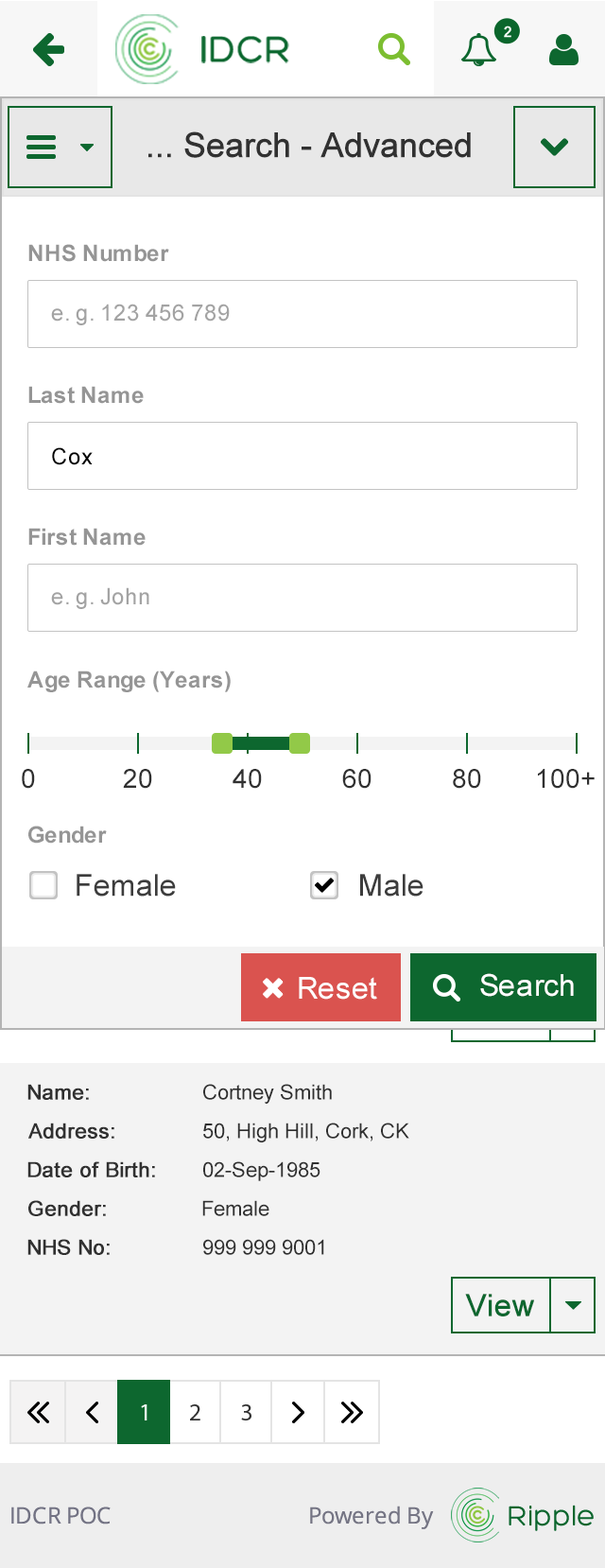
<style>
.page{position:relative;width:605px;height:1568px;background:#ffffff}
.page>*{position:absolute;margin:0}
.t1{font:34px "ArialMT";color:#313131;font-weight:bold}
.t2{font:22.7px "Arial-BoldMT";color:#959595}
.t3{font:22.7px "ArialMT";color:#a3a3a3}
.t4{font:22.7px "ArialMT";color:#000000}
.t5{font:26.5px "ArialMT";color:#303030}
.t6{font:30.3px "ArialMT";color:#3c3c3c}
.t7{font:30.3px "ArialMT";color:#ffffff}
.t8{font:20.8px "ArialMT";color:#303030;font-weight:bold}
.t9{font:20.8px "ArialMT";color:#303030}
.t10{font:30.3px "ArialMT";color:#0d672f;font-weight:bold}
</style>
<div class="page">
<p class="t1" style="left:148px;top:131px;width:323px;height:27px">... Search - Advanced</p>
<p class="t2" style="left:28px;top:244px;width:141px;height:18px">NHS Number</p>
<p class="t3" style="left:51px;top:304px;width:179px;height:21px">e. g. 123 456 789</p>
<p class="t2" style="left:28px;top:386px;width:116px;height:18px">Last Name</p>
<p class="t4" style="left:52px;top:447px;width:41px;height:18px">Cox</p>
<p class="t2" style="left:28px;top:528px;width:118px;height:18px">First Name</p>
<p class="t3" style="left:51px;top:587px;width:98px;height:22px">e. g. John</p>
<p class="t2" style="left:27px;top:671px;width:204px;height:21px">Age Range (Years)</p>
<p class="t5" style="left:22px;top:769px;width:13px;height:20px">0</p>
<p class="t5" style="left:123px;top:769px;width:29px;height:20px">20</p>
<p class="t5" style="left:233px;top:769px;width:29px;height:20px">40</p>
<p class="t5" style="left:342px;top:769px;width:30px;height:20px">60</p>
<p class="t5" style="left:453px;top:769px;width:28px;height:20px">80</p>
<p class="t5" style="left:538px;top:769px;width:57px;height:20px">100+</p>
<p class="t2" style="left:28px;top:826px;width:79px;height:18px">Gender</p>
<p class="t6" style="left:77px;top:874px;width:99px;height:23px">Female</p>
<p class="t6" style="left:360px;top:874px;width:64px;height:23px">Male</p>
<p class="t7" style="left:299px;top:977px;width:78px;height:23px">Reset</p>
<p class="t7" style="left:480px;top:973px;width:94px;height:24px">Search</p>
<p class="t8" style="left:27px;top:1084px;width:62px;height:16px">Name:</p>
<p class="t9" style="left:203px;top:1084px;width:129px;height:20px">Cortney Smith</p>
<p class="t8" style="left:28px;top:1123px;width:86px;height:16px">Address:</p>
<p class="t9" style="left:203px;top:1123px;width:206px;height:19px">50, High Hill, Cork, CK</p>
<p class="t8" style="left:27px;top:1161px;width:128px;height:16px">Date of Birth:</p>
<p class="t9" style="left:203px;top:1161px;width:118px;height:20px">02-Sep-1985</p>
<p class="t8" style="left:28px;top:1200px;width:78px;height:16px">Gender:</p>
<p class="t9" style="left:202px;top:1200px;width:68px;height:16px">Female</p>
<p class="t8" style="left:27px;top:1239px;width:83px;height:16px">NHS No:</p>
<p class="t9" style="left:203px;top:1239px;width:121px;height:16px">999 999 9001</p>
<p class="t10" style="left:465px;top:1294px;width:69px;height:22px">View</p>
</div>
